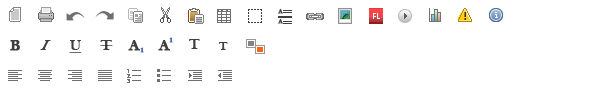
<style>
.page{position:relative;width:600px;height:90px;background:#ffffff}
.page>*{position:absolute;margin:0}
.t1{font:16px "BellMTBold";color:#3f3f3f;font-weight:bold}
.t2{font:16.9px "BellMTBold";color:#3f3f3f;font-style:italic;scale:0.95 1}
.t3{font:15px "BellMTBold";color:#3f3f3f;text-decoration:underline}
.t4{font:15px "BellMTBold";color:#3f3f3f}
.t5{font:12px "BellMTBold";color:#3f3f3f}
</style>
<div class="page">
<p class="t1" style="left:10px;top:40px;width:10px;height:11px">B</p>
<p class="t2" style="left:40px;top:40px;width:11px;height:10px">I</p>
<p class="t3" style="left:69px;top:40px;width:13px;height:13px">U</p>
<p class="t4" style="left:189px;top:39px;width:11px;height:10px">T</p>
<p class="t5" style="left:218px;top:42px;width:10px;height:8px">T</p>
</div>
